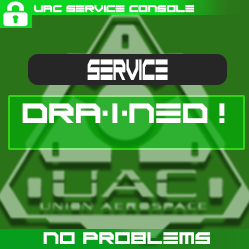
<style>
.page{position:relative;width:249px;height:249px;background:#2b7318}
.page>*{position:absolute;margin:0}
.t1{font:6.8px "ScifiAdventure";color:#ffffff}
.t2{font:20.5px "ScifiAdventure";color:#ffffff;scale:0.46 1}
.t3{font:19.4px "ScifiAdventure";color:#ffffff}
.t4{font:11.7px "ScifiAdventure";color:#ffffff}
</style>
<div class="page">
<p class="t1" style="left:34px;top:5px;width:161px;height:8px">UAC SERVICE CONSOLE</p>
<p class="t2" style="left:87px;top:59px;width:81px;height:21px">SERVICE</p>
<p class="t3" style="left:22px;top:103px;width:203px;height:20px">Drained!</p>
<p class="t4" style="left:43px;top:232px;width:167px;height:12px">No problems</p>
</div>
